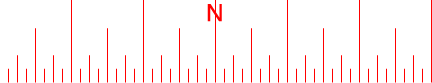
<style>
.page{position:relative;width:432px;height:83px;background:#ffffff}
.page>*{position:absolute;margin:0}
.t1{font:24.1px "HelveticaNeue";color:#ff0000}
</style>
<div class="page">
<p class="t1" style="left:207px;top:4px;width:15px;height:18px">N</p>
</div>
